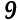
<style>
.page{position:relative;width:20px;height:20px;background:#ffffff}
.page>*{position:absolute;margin:0}
.t1{font:24px "Lobster";color:#000000}
</style>
<div class="page">
<p class="t1" style="left:5px;top:1px;width:12px;height:18px">9</p>
</div>
